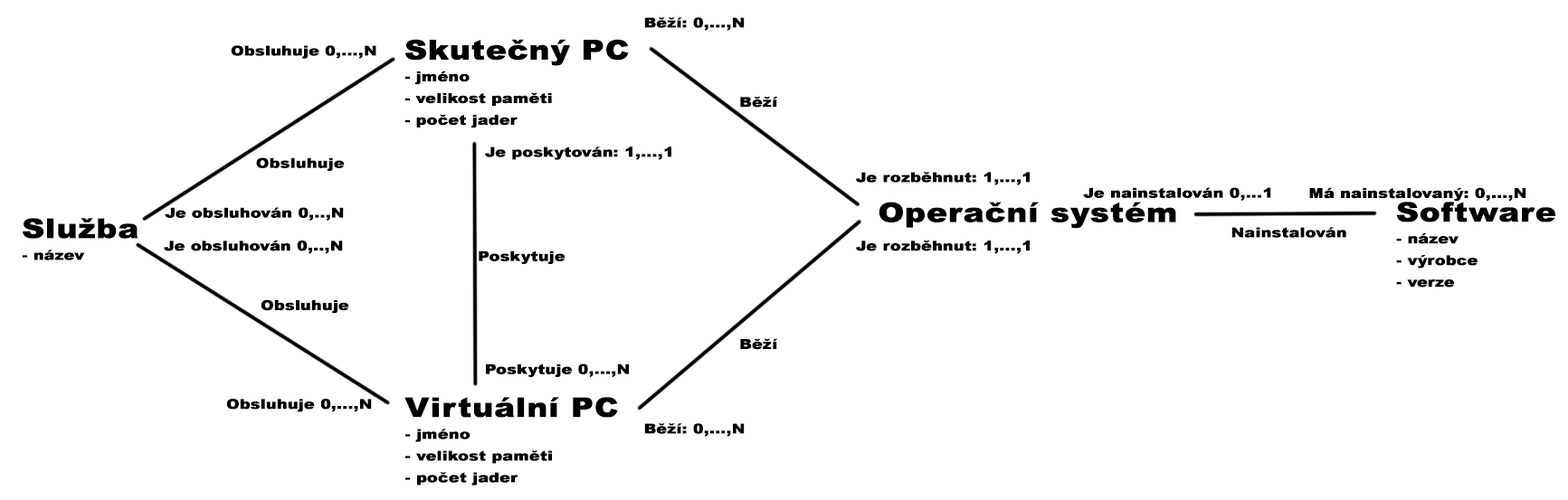
<style>
.page{position:relative;width:1568px;height:500px;background:#ffffff}
.page>*{position:absolute;margin:0}
.t1{font:13.6px "Arial-Black";color:#000000;font-weight:bold;scale:1.15 1}
.t2{font:27.1px "Arial-Black";color:#000000;font-weight:bold;scale:1.15 1}
</style>
<div class="page">
<p class="t1" style="left:644px;top:17px;width:101px;height:14px">Běží: 0,...,N</p>
<p class="t1" style="left:404px;top:39px;width:225px;height:89px"><span class="t2">Skutečný PC<br></span>- jméno<br>- velikost paměti<br>- počet jader</p>
<p class="t1" style="left:231px;top:45px;width:145px;height:14px">Obsluhuje 0,...,N</p>
<p class="t1" style="left:740px;top:97px;width:38px;height:11px">Běží</p>
<p class="t1" style="left:485px;top:147px;width:186px;height:13px">Je poskytován: 1,...,1</p>
<p class="t1" style="left:256px;top:157px;width:89px;height:14px">Obsluhuje</p>
<p class="t1" style="left:856px;top:172px;width:174px;height:13px">Je rozběhnut: 1,...,1</p>
<p class="t1" style="left:1083px;top:187px;width:188px;height:14px">Je nainstalován 0,...1</p>
<p class="t1" style="left:1309px;top:187px;width:217px;height:15px">Má nainstalovaný: 0,...,N</p>
<p class="t1" style="left:165px;top:207px;width:179px;height:14px">Je obsluhován 0,..,N</p>
<p class="t2" style="left:879px;top:202px;width:297px;height:27px">Operační systém</p>
<p class="t1" style="left:1396px;top:202px;width:159px;height:86px"><span class="t2">Software<br></span>- název<br>- výrobce<br>- verze</p>
<p class="t1" style="left:22px;top:218px;width:116px;height:43px"><span class="t2">Služba<br></span>- název</p>
<p class="t1" style="left:1231px;top:227px;width:115px;height:11px">Nainstalován</p>
<p class="t1" style="left:164px;top:241px;width:179px;height:13px">Je obsluhován 0,..,N</p>
<p class="t1" style="left:856px;top:241px;width:174px;height:13px">Je rozběhnut: 1,...,1</p>
<p class="t1" style="left:479px;top:251px;width:86px;height:13px">Poskytuje</p>
<p class="t1" style="left:261px;top:299px;width:88px;height:15px">Obsluhuje</p>
<p class="t1" style="left:740px;top:338px;width:38px;height:12px">Běží</p>
<p class="t1" style="left:486px;top:364px;width:143px;height:13px">Poskytuje 0,...,N</p>
<p class="t1" style="left:226px;top:399px;width:146px;height:14px">Obsluhuje 0,...,N</p>
<p class="t1" style="left:404px;top:397px;width:214px;height:89px"><span class="t2">Virtuální PC<br></span>- jméno<br>- velikost paměti<br>- počet jader</p>
<p class="t1" style="left:644px;top:423px;width:101px;height:14px">Běží: 0,...,N</p>
</div>
